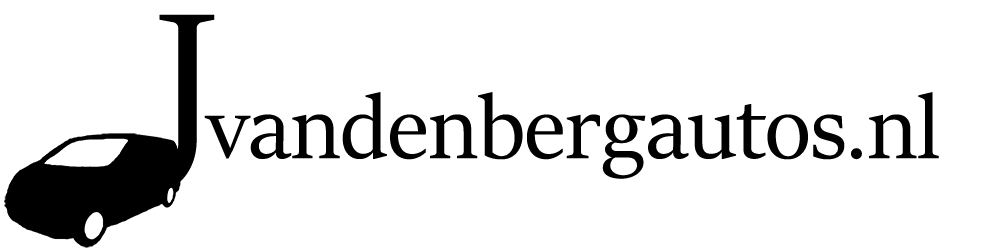
<style>
.page{position:relative;width:1000px;height:250px;background:#ffffff}
.page>*{position:absolute;margin:0}
.t1{font:226.4px "SitkaBanner";color:#000000}
.t2{font:98.1px "SitkaBanner";color:#000000}
</style>
<div class="page">
<p class="t1" style="left:136px;top:14px;width:79px;height:178px">J</p>
<p class="t2" style="left:204px;top:92px;width:735px;height:87px">vandenbergautos.nl</p>
</div>
